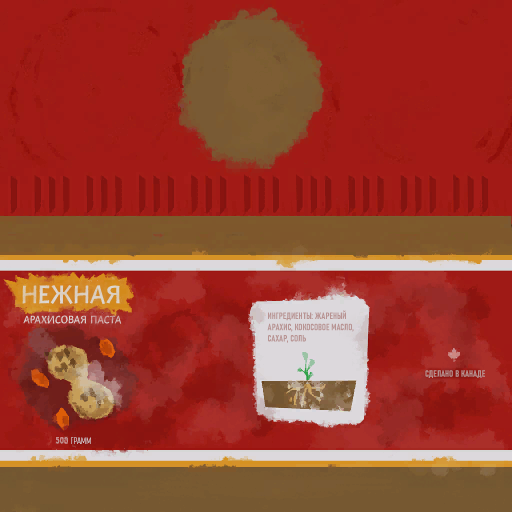
<style>
.page{position:relative;width:512px;height:512px}
.page>*{position:absolute;margin:0}
.t1{font:9.3px "Bahnschrift-BoldCondensed";color:#b89392;text-transform:uppercase}
.t2{font:9.1px "Bahnschrift-LightCondensed";text-transform:uppercase}
</style>
<div class="page">
<p class="t1" style="left:267px;top:310px;width:87px;height:33px">ИНГРеДИенты: жареный <br>арахис, кокосовое масло, <br>сахар, соль</p>
<p class="t1" style="left:425px;top:370px;width:60px;height:8px">сделано в канаде</p>
<p class="t2" style="left:71px;top:437px;width:20px;height:7px">грамм</p>
</div>
